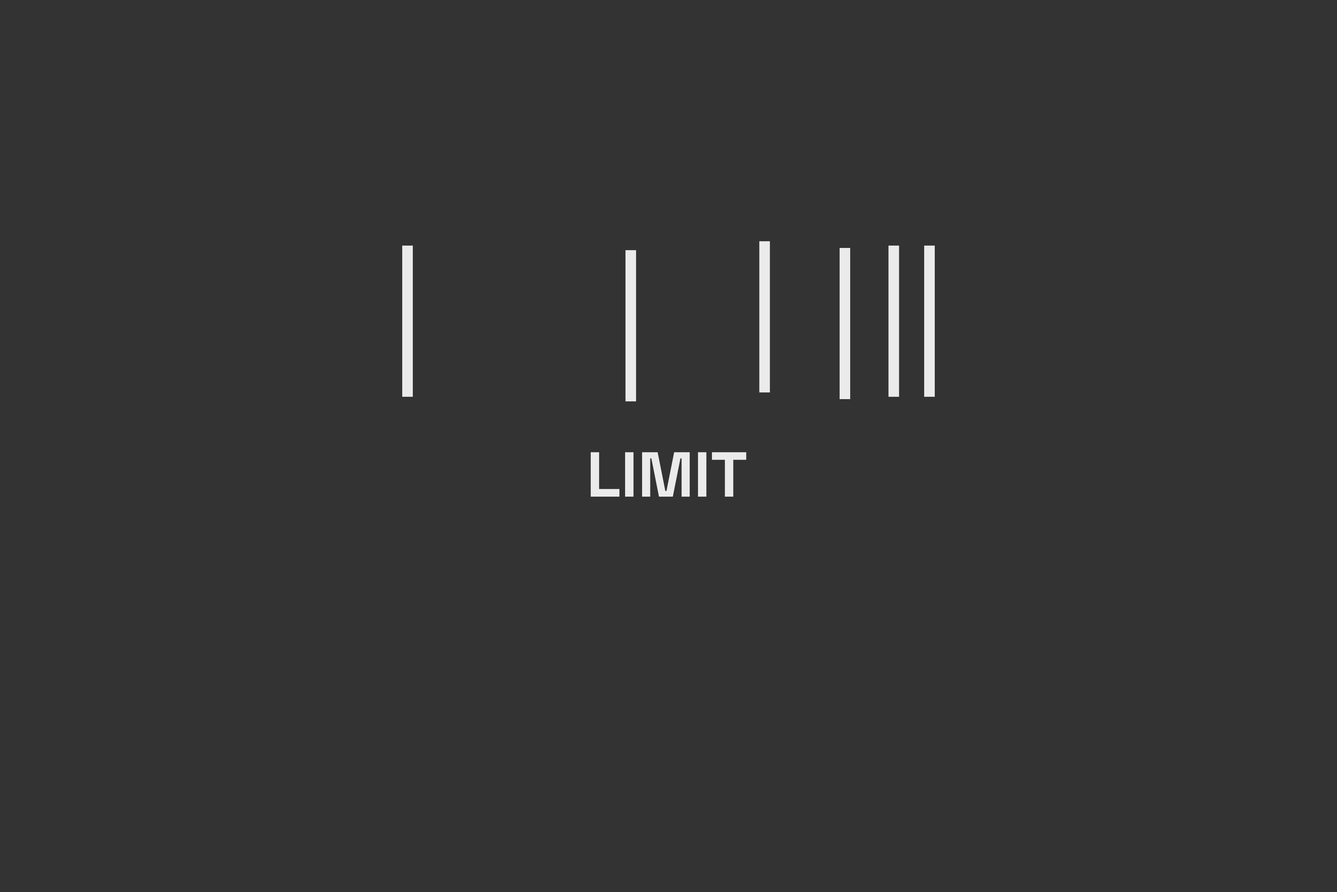
<style>
.page{position:relative;width:1337px;height:892px;background:#333333}
.page>*{position:absolute;margin:0}
.t1{font:63.5px "SpaceGroteskLight-Bold";color:#ebebeb}
</style>
<div class="page">
<p class="t1" style="left:591px;top:452px;width:156px;height:44px">LIMIT</p>
</div>
